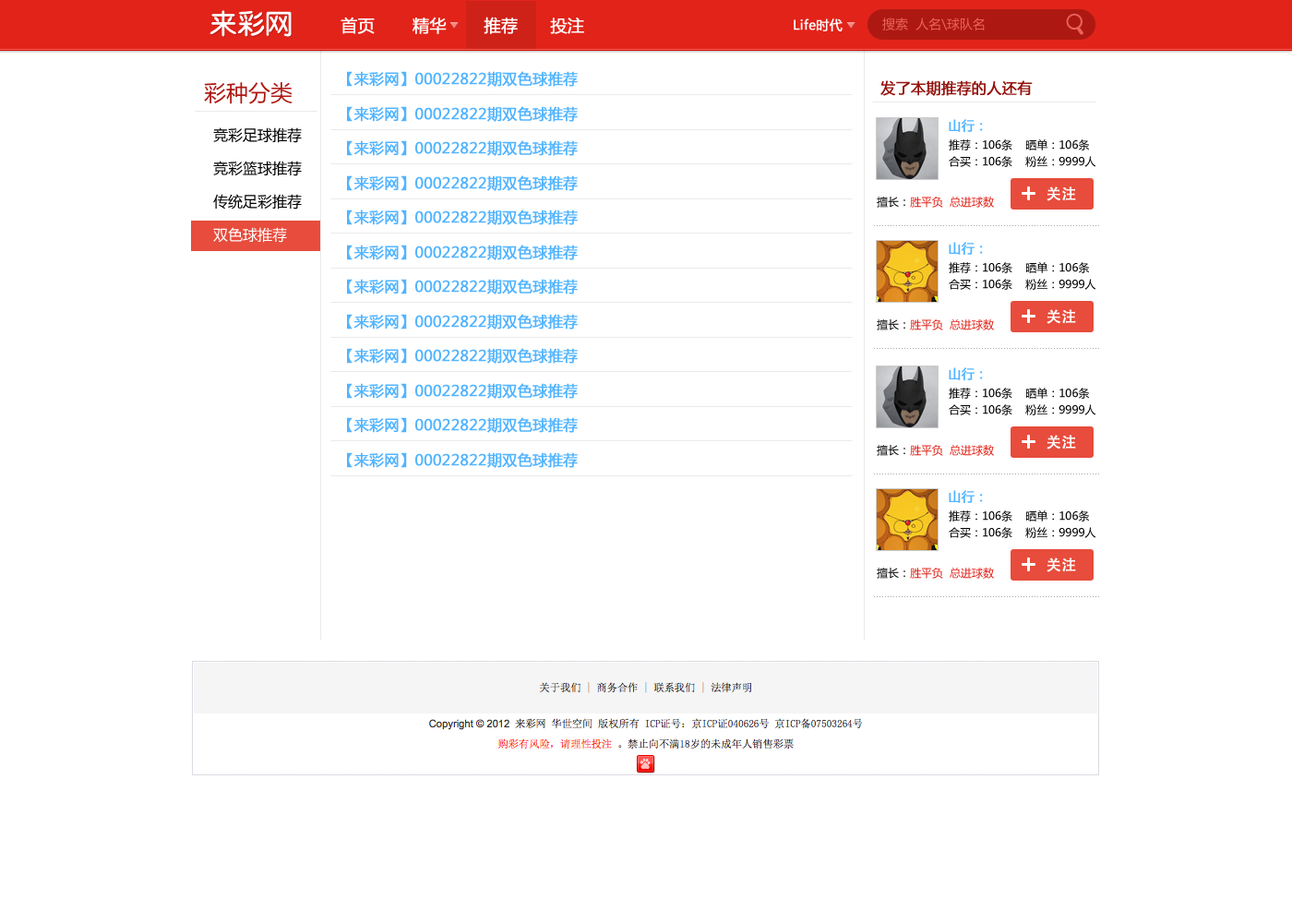
<style>
.page{position:relative;width:1292px;height:923px;background:#ffffff}
.page>*{position:absolute;margin:0}
.t1{font:16.6px "MicrosoftYaHei";color:#ffffff;font-weight:bold}
.t2{font:12.9px "MicrosoftYaHei";color:#ea625b}
.t3{font:12.9px "MicrosoftYaHei";color:#ffffff;font-weight:bold}
.t4{font:14.8px "MicrosoftYaHei";color:#52b4ff;font-weight:bold}
.t5{font:22.1px "MicrosoftYaHei";color:#ad1912}
.t6{font:14.8px "MicrosoftYaHei";color:#93130d;font-weight:bold}
.t7{font:12.9px "MicrosoftYaHei";color:#52b4ff;font-weight:bold}
.t8{font:14.8px/33.2px "MicrosoftYaHei";color:#010101}
.t9{font:14.8px/33.2px "MicrosoftYaHei";color:#ffffff}
.t10{font:11.1px/16.6px "MicrosoftYaHei";color:#000000}
.t11{font:11.1px "MicrosoftYaHei";color:#e22319}
.t12{font:11.1px "MicrosoftYaHei";color:#000000}
.t13{font:14.8px "AdobeHeitiStd-Regular";color:#ffffff;font-weight:bold}
.t14{font:5.5px "SimSun";color:#aaa9a9}
</style>
<div class="page">
<p class="t1" style="left:341px;top:17px;width:243px;height:17px">首页       精华       推荐      投注</p>
<p class="t2" style="left:882px;top:18px;width:103px;height:12px">搜索  人名\球队名</p>
<p class="t3" style="left:794px;top:18px;width:49px;height:13px">Life时代</p>
<p class="t4" style="left:347px;top:71px;width:231px;height:16px">【来彩网】00022822期双色球推荐</p>
<p class="t5" style="left:204px;top:82px;width:89px;height:22px">彩种分类</p>
<p class="t6" style="left:880px;top:80px;width:153px;height:16px">发了本期推荐的人还有</p>
<p class="t4" style="left:347px;top:106px;width:231px;height:16px">【来彩网】00022822期双色球推荐</p>
<p class="t7" style="left:949px;top:119px;width:34px;height:13px">山行：</p>
<p class="t8" style="left:213px;top:127px;width:89px;height:116px">竞彩足球推荐<br>竞彩篮球推荐<br>传统足彩推荐<br><span class="t9">双色球推荐</span></p>
<p class="t4" style="left:347px;top:140px;width:231px;height:16px">【来彩网】00022822期双色球推荐</p>
<p class="t10" style="left:949px;top:139px;width:147px;height:28px">推荐：106条    晒单：106条<br>合买：106条    粉丝：9999人</p>
<p class="t4" style="left:347px;top:175px;width:231px;height:16px">【来彩网】00022822期双色球推荐</p>
<p class="t11" style="left:877px;top:197px;width:117px;height:11px"><span class="t12">擅长：</span>胜平负  总进球数</p>
<p class="t13" style="left:1047px;top:186px;width:29px;height:15px">关注</p>
<p class="t14" style="left:874px;top:225px;width:225px;height:1px">..................................................................................</p>
<p class="t7" style="left:949px;top:242px;width:34px;height:13px">山行：</p>
<p class="t10" style="left:949px;top:262px;width:147px;height:28px">推荐：106条    晒单：106条<br>合买：106条    粉丝：9999人</p>
<p class="t13" style="left:1047px;top:309px;width:29px;height:15px">关注</p>
<p class="t11" style="left:877px;top:319px;width:117px;height:11px"><span class="t12">擅长：</span>胜平负  总进球数</p>
<p class="t14" style="left:874px;top:348px;width:225px;height:1px">..................................................................................</p>
</div>
